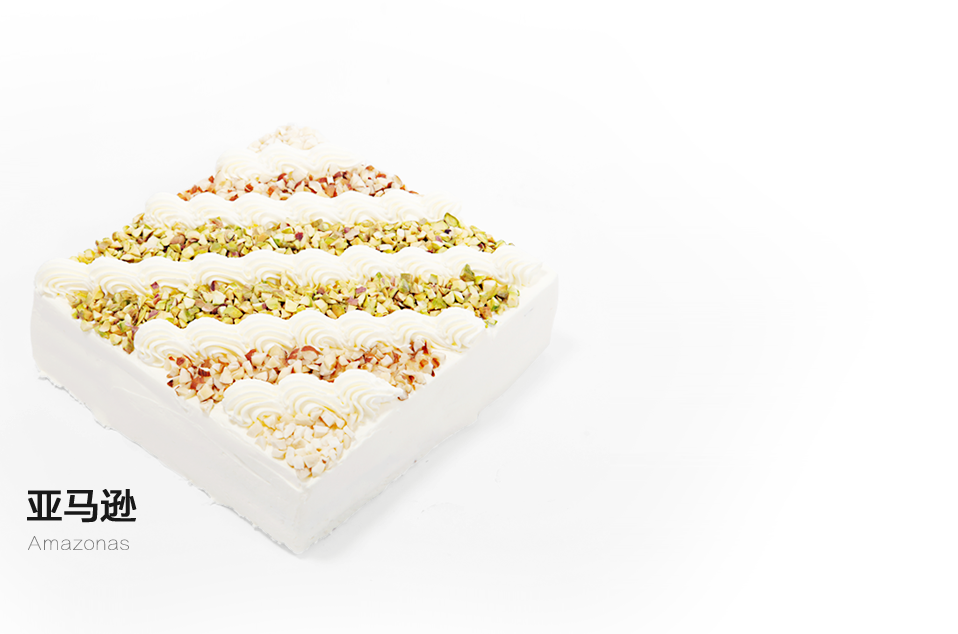
<style>
.page{position:relative;width:958px;height:634px;background:#ffffff}
.page>*{position:absolute;margin:0}
.t1{font:36px "FZLTZHUNHK--GBK1-0";color:#000000;font-weight:bold}
.t2{font:18px "FZLTCXHJW--GB1-0";color:#7b7b7b;font-weight:bold}
</style>
<div class="page">
<p class="t1" style="left:27px;top:489px;width:110px;height:34px;opacity:0.9">亚马逊</p>
<p class="t2" style="left:28px;top:536px;width:101px;height:14px">Amazonas</p>
</div>
